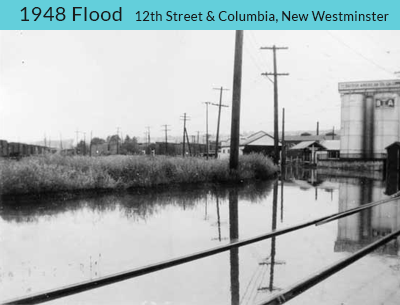
<style>
.page{position:relative;width:400px;height:305px}
.page>*{position:absolute;margin:0}
.t1{font:20px "Lato-Regular";letter-spacing:0.025em;color:#1a1a1a}
.t2{font:13px "Lato-Regular";letter-spacing:0.025em;color:#1a1a1a}
</style>
<div class="page">
<p class="t1" style="left:20px;top:7px;width:102px;height:14px">1948 Flood</p>
<p class="t2" style="left:135px;top:11px;width:254px;height:12px">12th Street &amp; Columbia, New Westminster</p>
</div>
